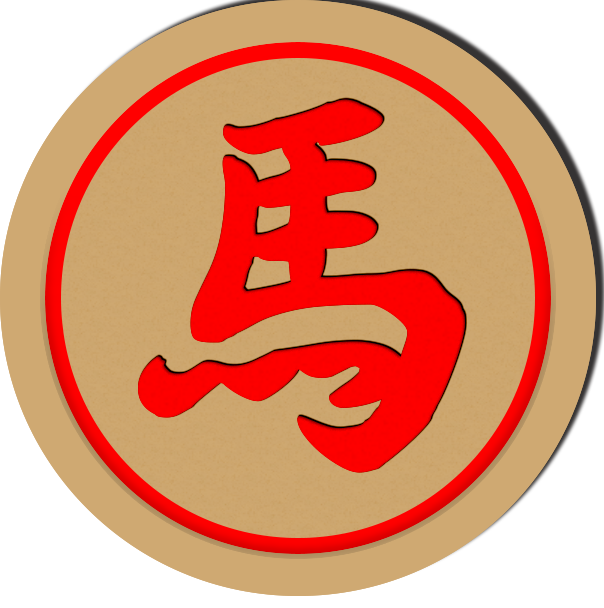
<style>
.page{position:relative;width:604px;height:608px;background:#ffffff}
.page>*{position:absolute;margin:0}
.t1{font:416.7px "AaYuwenlaoshidezi";letter-spacing:0.04em;color:#ff0000}
</style>
<div class="page">
<p class="t1" style="left:138px;top:99px;width:327px;height:374px">馬</p>
<p class="t1" style="left:138px;top:99px;width:327px;height:374px">馬</p>
<p class="t1" style="left:138px;top:99px;width:327px;height:374px">馬</p>
</div>
